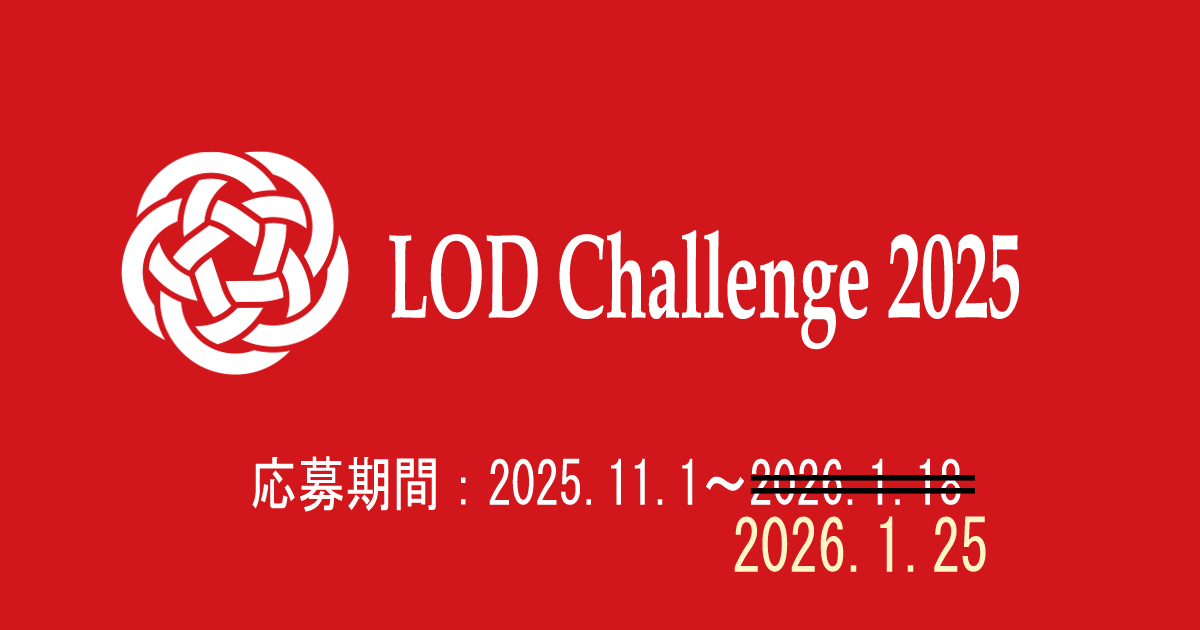
<style>
.page{position:relative;width:1200px;height:630px;background:#d1171c}
.page>*{position:absolute;margin:0}
.t1{font:120px "BookAntiqua-Bold";color:#ffffff;scale:0.56 1}
.t2{font:60px "MS-Gothic";color:#ffffff;scale:0.79 1}
.t3{font:72px "MS-Gothic";color:#fff4c3;scale:0.79 1}
</style>
<div class="page">
<p class="t1" style="left:389px;top:230px;width:630px;height:120px">LOD Challenge 2025</p>
<p class="t2" style="left:252px;top:456px;width:709px;height:56px">応募期間：2025.11.1～2026.1.18</p>
<p class="t3" style="left:734px;top:516px;width:252px;height:56px">2026.1.25</p>
</div>
